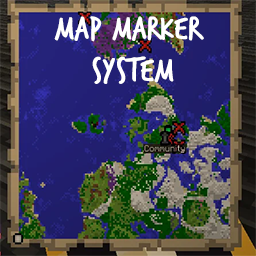
<style>
.page{position:relative;width:256px;height:256px}
.page>*{position:absolute;margin:0}
.t1{font:35px "TrashHand";color:#ffffff;font-weight:bold}
</style>
<div class="page">
<p class="t1" style="left:54px;top:16px;width:150px;height:68px;text-align:center">Map Marker <br>System</p>
</div>
